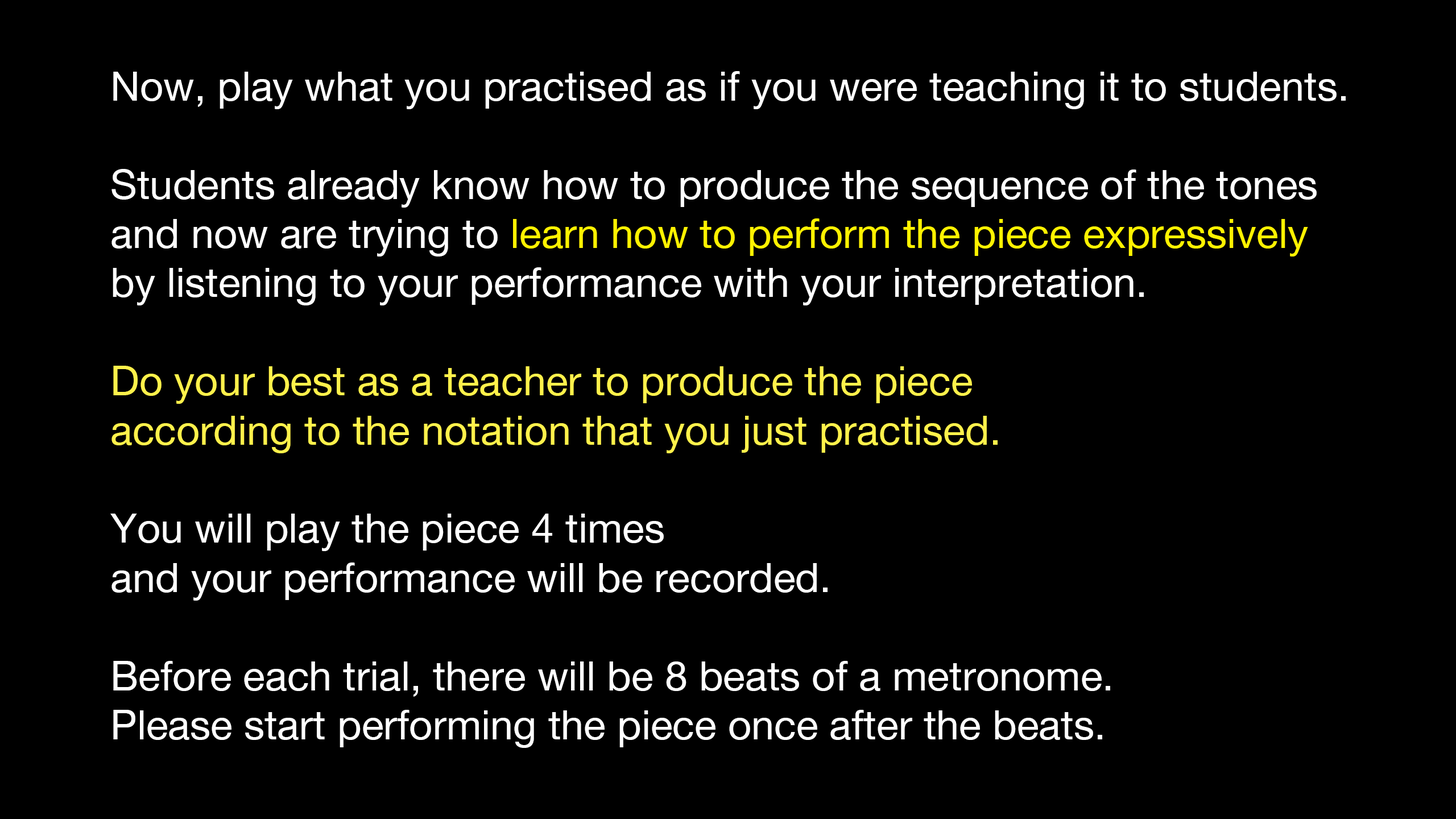
<style>
.page{position:relative;width:1456px;height:819px;background:#000000}
.page>*{position:absolute;margin:0}
.t1{font:40.9px "HelveticaNeue";color:#ffffff}
.t2{font:40.9px "HelveticaNeue";color:#fff200}
.t3{font:40.9px "HelveticaNeue";color:#fff14b}
</style>
<div class="page">
<p class="t1" style="left:110px;top:71px;width:1236px;height:677px">Now, play what you practised as if you were teaching it to students.<br><br>Students already know how to produce the sequence of the tones <br>and now are trying to <span class="t2">learn how to perform the piece expressively<br></span>by listening to your performance with your interpretation.<br><br><span class="t3">Do your best as a teacher to produce the piece<br>according to the notation that you just practised.<br></span><br>You will play the piece 4 times<br>and your performance will be recorded.<br><br>Before each trial, there will be 8 beats of a metronome.<br>Please start performing the piece once after the beats.</p>
</div>
